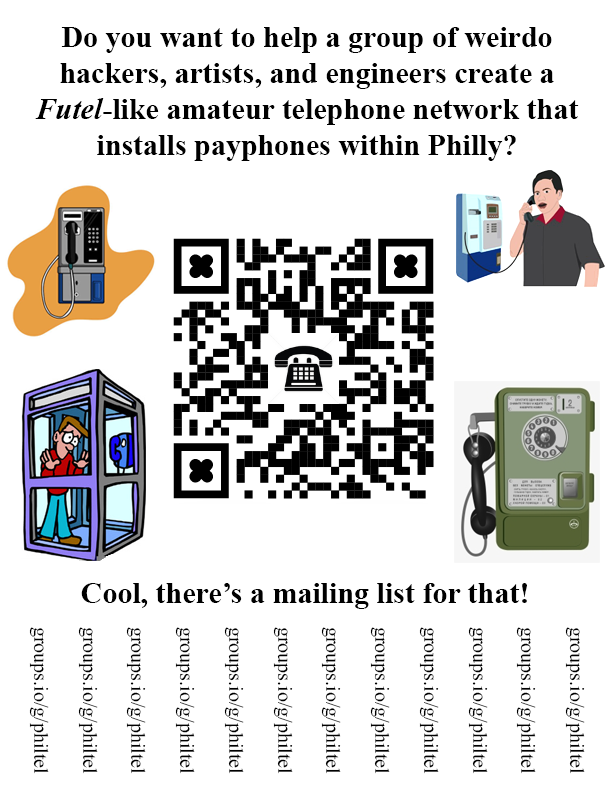
<style>
.page{position:relative;width:612px;height:792px;background:#ffffff}
.page>*{position:absolute;margin:0}
.t1{font:30px "TimesNewRomanPS-BoldMT";color:#000000}
.t2{font:30px "TimesNewRomanPS-BoldItalicMT";color:#000000}
.t3{font:20px "TimesNewRomanPSMT";color:#000000}
</style>
<div class="page">
<p class="t1" style="left:35px;top:27px;width:544px;height:134px;text-align:center">Do you want to help a group of weirdo <br>hackers, artists, and engineers create a <br><span class="t2">Futel</span>-like amateur telephone network that installs payphones within Philly?</p>
<p class="t1" style="left:81px;top:583px;width:446px;height:26px">Cool, there’s a mailing list for that!</p>
<p class="t3" style="left:29px;top:627px;width:20px;height:147px;rotate:90deg">groups.io/g/philtel</p>
<p class="t3" style="left:78px;top:627px;width:20px;height:147px;rotate:90deg">groups.io/g/philtel</p>
<p class="t3" style="left:126px;top:627px;width:20px;height:147px;rotate:90deg">groups.io/g/philtel</p>
<p class="t3" style="left:175px;top:627px;width:20px;height:147px;rotate:90deg">groups.io/g/philtel</p>
<p class="t3" style="left:224px;top:627px;width:20px;height:147px;rotate:90deg">groups.io/g/philtel</p>
<p class="t3" style="left:273px;top:627px;width:20px;height:147px;rotate:90deg">groups.io/g/philtel</p>
<p class="t3" style="left:321px;top:627px;width:20px;height:147px;rotate:90deg">groups.io/g/philtel</p>
<p class="t3" style="left:370px;top:627px;width:20px;height:147px;rotate:90deg">groups.io/g/philtel</p>
<p class="t3" style="left:419px;top:627px;width:20px;height:147px;rotate:90deg">groups.io/g/philtel</p>
<p class="t3" style="left:468px;top:627px;width:20px;height:147px;rotate:90deg">groups.io/g/philtel</p>
<p class="t3" style="left:516px;top:627px;width:20px;height:147px;rotate:90deg">groups.io/g/philtel</p>
<p class="t3" style="left:565px;top:627px;width:20px;height:147px;rotate:90deg">groups.io/g/philtel</p>
</div>
